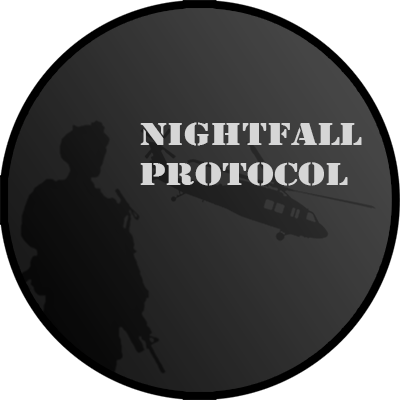
<style>
.page{position:relative;width:400px;height:400px;background:#ffffff}
.page>*{position:absolute;margin:0}
.t1{font:33.3px "Stencil";color:#d6d6d6;scale:1.27 1}
</style>
<div class="page">
<p class="t1" style="left:140px;top:122px;width:222px;height:64px">NightFall<br>Protocol</p>
</div>
